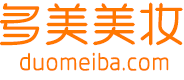
<style>
.page{position:relative;width:184px;height:80px;background:#ffffff}
.page>*{position:absolute;margin:0}
.t1{font:47.2px "RTWSYueRoudGoG0v1-Regular";color:#ff7700}
.t2{font:25px "RTWSYueRoudGoG0v1-Regular";color:#ff7700}
</style>
<div class="page">
<p class="t1" style="left:0px;top:2px;width:183px;height:44px">多美美妆</p>
<p class="t2" style="left:20px;top:52px;width:149px;height:19px">duomeiba.com</p>
</div>
